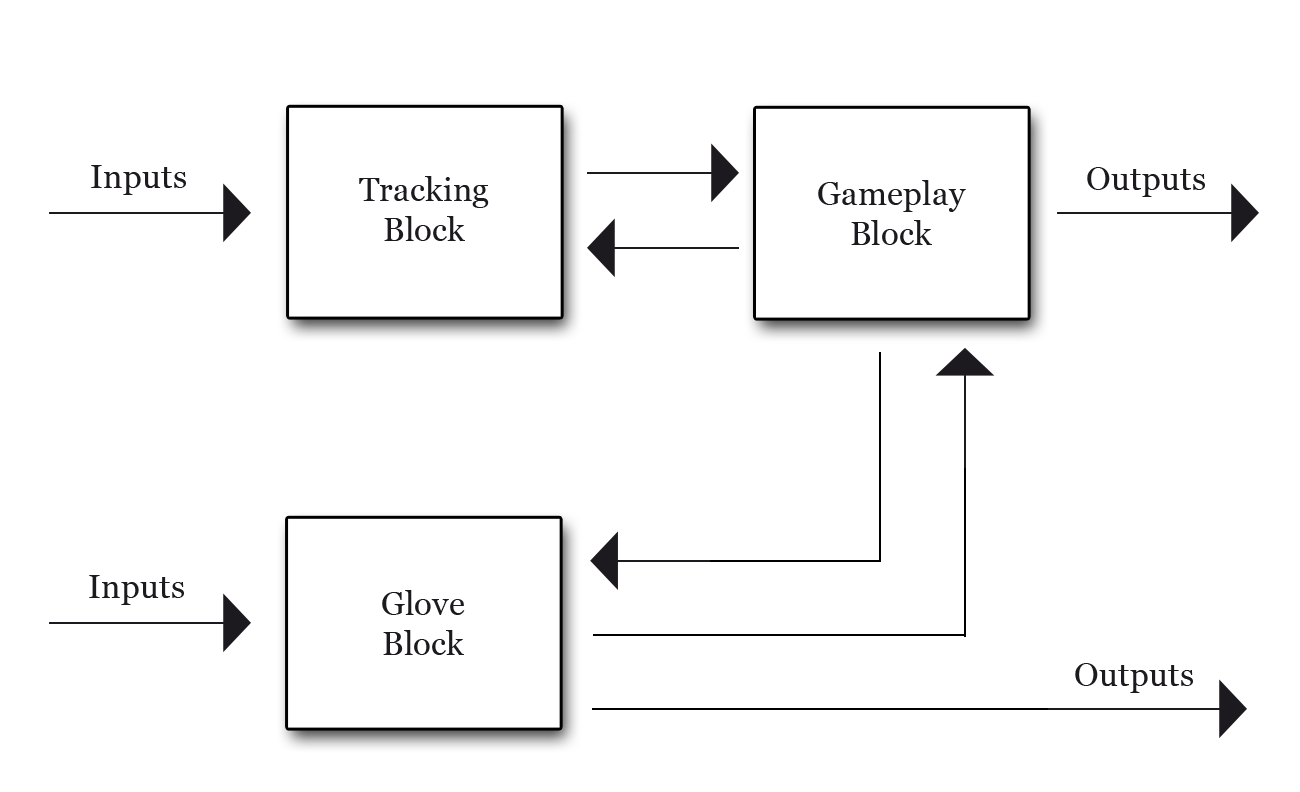
<style>
.page{position:relative;width:1300px;height:792px;background:#ffffff}
.page>*{position:absolute;margin:0}
.t1{font:33.3px "Georgia";color:#1c1a1e}
</style>
<div class="page">
<p class="t1" style="left:91px;top:165px;width:95px;height:30px">Inputs</p>
<p class="t1" style="left:1087px;top:167px;width:118px;height:30px">Outputs</p>
<p class="t1" style="left:359px;top:176px;width:130px;height:65px;text-align:center">Tracking<br>Block</p>
<p class="t1" style="left:818px;top:180px;width:148px;height:65px;text-align:center">Gameplay<br>Block</p>
<p class="t1" style="left:89px;top:575px;width:95px;height:30px">Inputs</p>
<p class="t1" style="left:382px;top:590px;width:83px;height:65px;text-align:center">Glove<br>Block</p>
<p class="t1" style="left:1075px;top:663px;width:118px;height:30px">Outputs</p>
</div>
